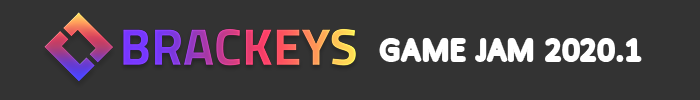
<style>
.page{position:relative;width:700px;height:100px;background:#333333}
.page>*{position:absolute;margin:0}
.t1{font:32px "Calibri-Light";letter-spacing:0.05em;color:#ffffff;text-transform:uppercase}
</style>
<div class="page">
<p class="t1" style="left:381px;top:40px;width:259px;height:20px">Game Jam 2020.1</p>
</div>
